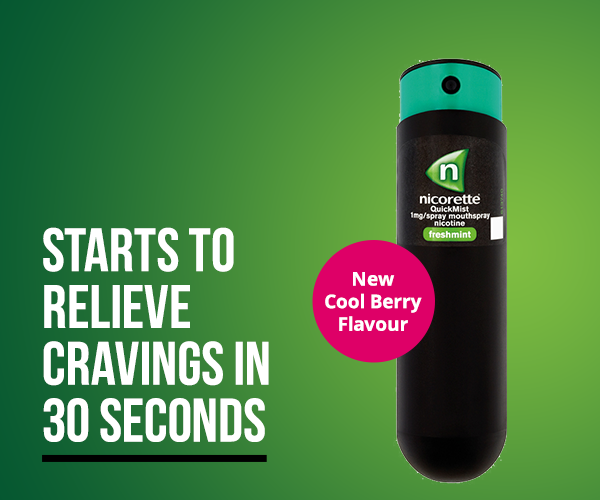
<style>
.page{position:relative;width:600px;height:500px}
.page>*{position:absolute;margin:0}
.t1{font:61.2px/56.8px "BebasNeue";color:#ffffff;text-transform:uppercase}
.t2{font:18.8px "OpenSans-Bold";color:#ffffff}
</style>
<div class="page">
<p class="t1" style="left:43px;top:227px;width:226px;height:215px">Starts to<br>relieve<br>cravings in<br>30 seconds</p>
<p class="t2" style="left:325px;top:272px;width:97px;height:59px;text-align:center">New<br>Cool Berry<br>Flavour</p>
</div>
